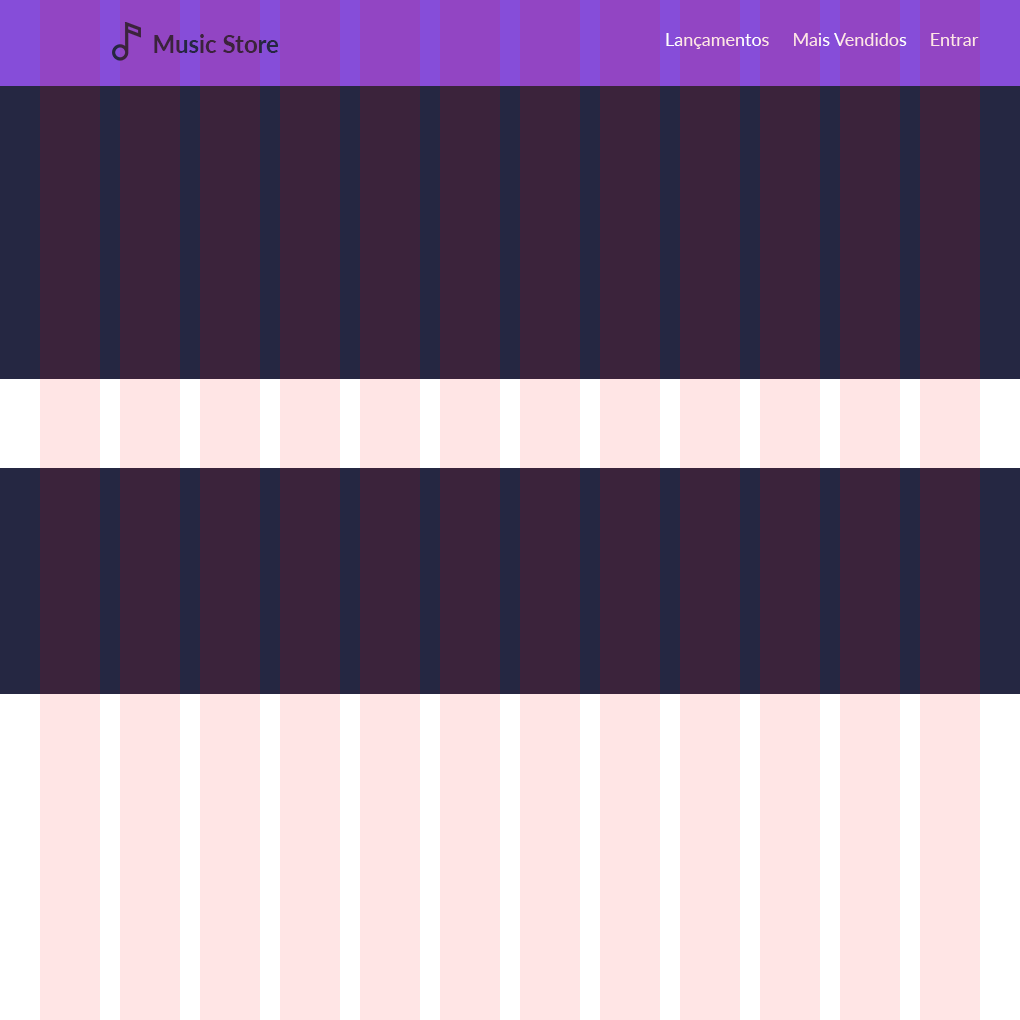
<style>
.page{position:relative;width:1020px;height:1020px;background:#3b233b}
.page>*{position:absolute;margin:0}
.t1{font:24px "Lato-Bold";color:#252742}
.t2{font:18px "Lato-Regular";color:#ffe5e5}
</style>
<div class="page">
<p class="t1" style="left:154px;top:34px;width:125px;height:19px">Music Store</p>
<p class="t2" style="left:666px;top:33px;width:313px;height:16px">Lançamentos     Mais Vendidos     Entrar</p>
</div>
